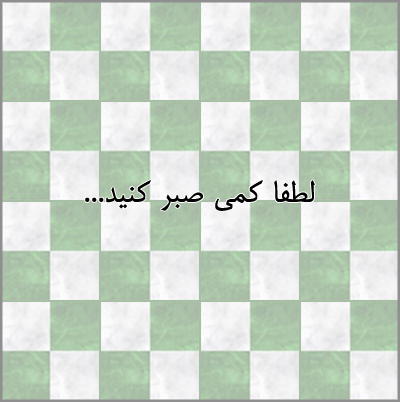
<style>
.page{position:relative;width:400px;height:402px}
.page>*{position:absolute;margin:0}
.t1{font:36px "BMitra";color:#000000;font-weight:bold}
</style>
<div class="page">
<p class="t1" style="left:85px;top:180px;width:230px;height:31px">لطفا کمی صبر کنید...</p>
</div>
